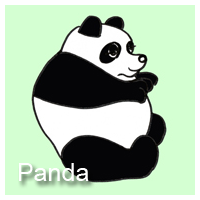
<style>
.page{position:relative;width:200px;height:200px;background:#d4ffd2}
.page>*{position:absolute;margin:0}
.t1{font:25px "ArialMT";color:#ffffff}
</style>
<div class="page">
<p class="t1" style="left:19px;top:163px;width:70px;height:18px">Panda</p>
</div>
